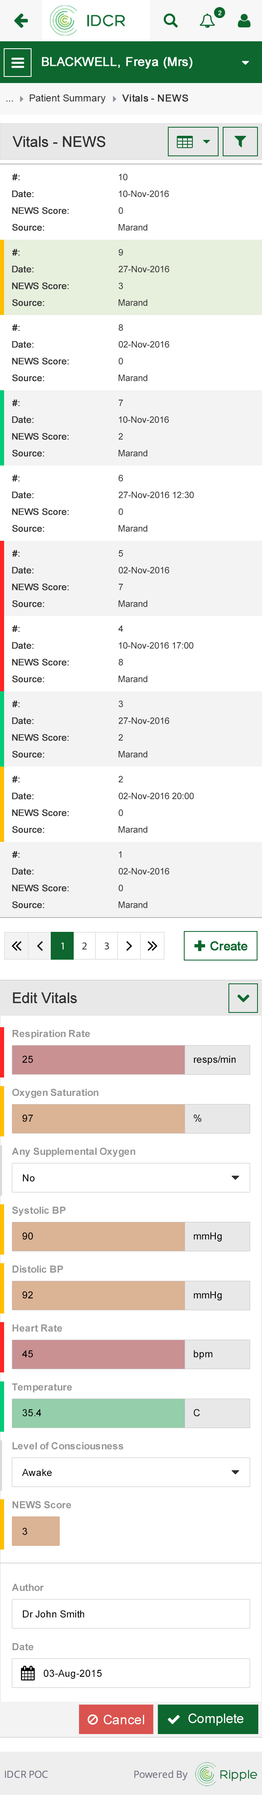
<style>
.page{position:relative;width:262px;height:1795px;background:#ffffff}
.page>*{position:absolute;margin:0}
.t1{font:9.8px "ArialMT";color:#313131}
.t2{font:9.8px "ArialMT";color:#313131;font-weight:bold}
.t3{font:14.7px "ArialMT";color:#303030;font-weight:bold}
.t4{font:9px "ArialMT";color:#303030;font-weight:bold}
.t5{font:9px "ArialMT";color:#303030}
.t6{font:9.8px "Arial-BoldMT";color:#959595}
.t7{font:9.8px "ArialMT";color:#000000}
</style>
<div class="page">
<p class="t1" style="left:6px;top:101px;width:7px;height:0px">...</p>
<p class="t1" style="left:29px;top:94px;width:77px;height:10px">Patient Summary</p>
<p class="t2" style="left:122px;top:94px;width:66px;height:8px">Vitals - NEWS</p>
<p class="t3" style="left:12px;top:136px;width:94px;height:11px">Vitals - NEWS</p>
<p class="t4" style="left:12px;top:173px;width:8px;height:7px">#:</p>
<p class="t5" style="left:119px;top:173px;width:9px;height:7px">10</p>
<p class="t4" style="left:12px;top:190px;width:22px;height:7px">Date:</p>
<p class="t5" style="left:119px;top:190px;width:50px;height:7px">10-Nov-2016</p>
<p class="t4" style="left:12px;top:207px;width:57px;height:7px">NEWS Score:</p>
<p class="t5" style="left:119px;top:207px;width:4px;height:7px">0</p>
<p class="t4" style="left:12px;top:224px;width:32px;height:7px">Source:</p>
<p class="t5" style="left:118px;top:224px;width:29px;height:7px">Marand</p>
<p class="t4" style="left:12px;top:249px;width:8px;height:7px">#:</p>
<p class="t5" style="left:119px;top:249px;width:4px;height:7px">9</p>
<p class="t4" style="left:12px;top:266px;width:22px;height:6px">Date:</p>
<p class="t5" style="left:118px;top:266px;width:51px;height:6px">27-Nov-2016</p>
<p class="t4" style="left:12px;top:282px;width:57px;height:7px">NEWS Score:</p>
<p class="t5" style="left:119px;top:282px;width:4px;height:7px">3</p>
<p class="t4" style="left:12px;top:299px;width:32px;height:7px">Source:</p>
<p class="t5" style="left:118px;top:299px;width:29px;height:7px">Marand</p>
<p class="t4" style="left:12px;top:324px;width:8px;height:7px">#:</p>
<p class="t5" style="left:119px;top:324px;width:4px;height:7px">8</p>
<p class="t4" style="left:12px;top:341px;width:22px;height:7px">Date:</p>
<p class="t5" style="left:119px;top:341px;width:50px;height:7px">02-Nov-2016</p>
<p class="t4" style="left:12px;top:358px;width:57px;height:6px">NEWS Score:</p>
<p class="t5" style="left:119px;top:358px;width:4px;height:6px">0</p>
<p class="t4" style="left:12px;top:374px;width:32px;height:7px">Source:</p>
<p class="t5" style="left:118px;top:374px;width:29px;height:7px">Marand</p>
<p class="t4" style="left:12px;top:399px;width:8px;height:7px">#:</p>
<p class="t5" style="left:119px;top:400px;width:4px;height:6px">7</p>
<p class="t4" style="left:12px;top:416px;width:22px;height:7px">Date:</p>
<p class="t5" style="left:119px;top:416px;width:50px;height:7px">10-Nov-2016</p>
<p class="t4" style="left:12px;top:433px;width:57px;height:7px">NEWS Score:</p>
<p class="t5" style="left:118px;top:433px;width:5px;height:7px">2</p>
<p class="t4" style="left:12px;top:450px;width:32px;height:7px">Source:</p>
<p class="t5" style="left:118px;top:450px;width:29px;height:7px">Marand</p>
<p class="t4" style="left:12px;top:475px;width:8px;height:7px">#:</p>
<p class="t5" style="left:118px;top:475px;width:5px;height:7px">6</p>
<p class="t4" style="left:12px;top:491px;width:22px;height:7px">Date:</p>
<p class="t5" style="left:118px;top:491px;width:76px;height:7px">27-Nov-2016 12:30</p>
<p class="t4" style="left:12px;top:508px;width:57px;height:7px">NEWS Score:</p>
<p class="t5" style="left:119px;top:508px;width:4px;height:7px">0</p>
<p class="t4" style="left:12px;top:525px;width:32px;height:7px">Source:</p>
<p class="t5" style="left:118px;top:525px;width:29px;height:7px">Marand</p>
<p class="t4" style="left:12px;top:550px;width:8px;height:7px">#:</p>
<p class="t5" style="left:119px;top:550px;width:4px;height:7px">5</p>
<p class="t4" style="left:12px;top:567px;width:22px;height:7px">Date:</p>
<p class="t5" style="left:119px;top:567px;width:50px;height:7px">02-Nov-2016</p>
<p class="t4" style="left:12px;top:583px;width:57px;height:7px">NEWS Score:</p>
<p class="t5" style="left:119px;top:584px;width:4px;height:6px">7</p>
<p class="t4" style="left:12px;top:600px;width:32px;height:7px">Source:</p>
<p class="t5" style="left:118px;top:600px;width:29px;height:7px">Marand</p>
<p class="t4" style="left:12px;top:625px;width:8px;height:7px">#:</p>
<p class="t5" style="left:118px;top:626px;width:5px;height:6px">4</p>
<p class="t4" style="left:12px;top:642px;width:22px;height:7px">Date:</p>
<p class="t5" style="left:119px;top:642px;width:75px;height:7px">10-Nov-2016 17:00</p>
<p class="t4" style="left:12px;top:659px;width:57px;height:7px">NEWS Score:</p>
<p class="t5" style="left:119px;top:659px;width:4px;height:7px">8</p>
<p class="t4" style="left:12px;top:675px;width:32px;height:7px">Source:</p>
<p class="t5" style="left:118px;top:675px;width:29px;height:7px">Marand</p>
<p class="t4" style="left:12px;top:700px;width:8px;height:7px">#:</p>
<p class="t5" style="left:119px;top:700px;width:4px;height:7px">3</p>
<p class="t4" style="left:12px;top:717px;width:22px;height:7px">Date:</p>
<p class="t5" style="left:118px;top:717px;width:51px;height:7px">27-Nov-2016</p>
<p class="t4" style="left:12px;top:734px;width:57px;height:7px">NEWS Score:</p>
<p class="t5" style="left:118px;top:734px;width:5px;height:7px">2</p>
<p class="t4" style="left:12px;top:751px;width:32px;height:7px">Source:</p>
<p class="t5" style="left:118px;top:751px;width:29px;height:7px">Marand</p>
<p class="t4" style="left:12px;top:776px;width:8px;height:7px">#:</p>
<p class="t5" style="left:118px;top:776px;width:5px;height:7px">2</p>
<p class="t4" style="left:12px;top:792px;width:22px;height:7px">Date:</p>
<p class="t5" style="left:119px;top:792px;width:75px;height:7px">02-Nov-2016 20:00</p>
<p class="t4" style="left:12px;top:809px;width:57px;height:7px">NEWS Score:</p>
<p class="t5" style="left:119px;top:809px;width:4px;height:7px">0</p>
<p class="t4" style="left:12px;top:826px;width:32px;height:7px">Source:</p>
<p class="t5" style="left:118px;top:826px;width:29px;height:7px">Marand</p>
<p class="t4" style="left:12px;top:851px;width:8px;height:7px">#:</p>
<p class="t5" style="left:119px;top:851px;width:3px;height:7px">1</p>
<p class="t4" style="left:12px;top:868px;width:22px;height:7px">Date:</p>
<p class="t5" style="left:119px;top:868px;width:50px;height:7px">02-Nov-2016</p>
<p class="t4" style="left:12px;top:884px;width:57px;height:7px">NEWS Score:</p>
<p class="t5" style="left:119px;top:884px;width:4px;height:7px">0</p>
<p class="t4" style="left:12px;top:901px;width:32px;height:7px">Source:</p>
<p class="t5" style="left:118px;top:901px;width:29px;height:7px">Marand</p>
<p class="t3" style="left:13px;top:992px;width:64px;height:12px">Edit Vitals</p>
<p class="t6" style="left:12px;top:1030px;width:78px;height:9px">Respiration Rate</p>
<p class="t7" style="left:22px;top:1055px;width:11px;height:8px">25</p>
<p class="t7" style="left:194px;top:1055px;width:42px;height:10px">resps/min</p>
<p class="t6" style="left:12px;top:1089px;width:87px;height:9px">Oxygen Saturation</p>
<p class="t7" style="left:22px;top:1114px;width:11px;height:8px">97</p>
<p class="t7" style="left:194px;top:1114px;width:7px;height:8px">%</p>
<p class="t6" style="left:12px;top:1148px;width:123px;height:9px">Any Supplemental Oxygen</p>
<p class="t7" style="left:23px;top:1174px;width:12px;height:8px">No</p>
<p class="t6" style="left:12px;top:1206px;width:53px;height:10px">Systolic BP</p>
<p class="t7" style="left:22px;top:1232px;width:11px;height:8px">90</p>
<p class="t7" style="left:194px;top:1232px;width:28px;height:10px">mmHg</p>
<p class="t6" style="left:12px;top:1265px;width:51px;height:8px">Distolic BP</p>
<p class="t7" style="left:22px;top:1291px;width:11px;height:8px">92</p>
<p class="t7" style="left:194px;top:1291px;width:28px;height:9px">mmHg</p>
<p class="t6" style="left:12px;top:1324px;width:50px;height:8px">Heart Rate</p>
<p class="t7" style="left:194px;top:1350px;width:18px;height:9px">bpm</p>
<p class="t7" style="left:22px;top:1350px;width:11px;height:8px">45</p>
<p class="t6" style="left:12px;top:1383px;width:60px;height:10px">Temperature</p>
<p class="t7" style="left:22px;top:1409px;width:19px;height:8px">35.4</p>
<p class="t7" style="left:194px;top:1409px;width:6px;height:8px">C</p>
<p class="t6" style="left:12px;top:1442px;width:111px;height:8px">Level of Consciousness</p>
<p class="t7" style="left:22px;top:1469px;width:30px;height:7px">Awake</p>
<p class="t6" style="left:12px;top:1501px;width:59px;height:8px">NEWS Score</p>
<p class="t7" style="left:22px;top:1528px;width:5px;height:7px">3</p>
<p class="t6" style="left:12px;top:1584px;width:32px;height:7px">Author</p>
<p class="t7" style="left:23px;top:1610px;width:61px;height:8px">Dr John Smith</p>
<p class="t6" style="left:12px;top:1643px;width:22px;height:8px">Date</p>
<p class="t7" style="left:44px;top:1670px;width:58px;height:9px">03-Aug-2015</p>
</div>
